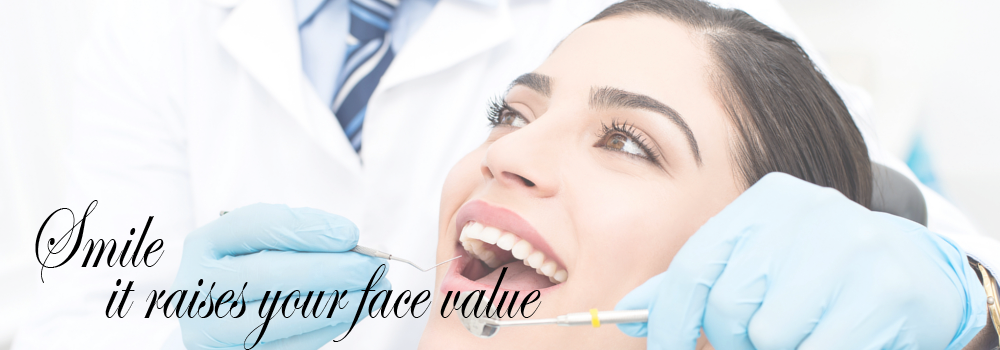
<style>
.page{position:relative;width:1000px;height:350px}
.page>*{position:absolute;margin:0}
.t1{font:100.9px "EdwardianScriptITC";color:#000000;scale:0.72 1}
</style>
<div class="page">
<p class="t1" style="left:35px;top:200px;width:130px;height:83px">Smile</p>
<p class="t1" style="left:105px;top:264px;width:437px;height:86px">it raises your face value</p>
</div>
